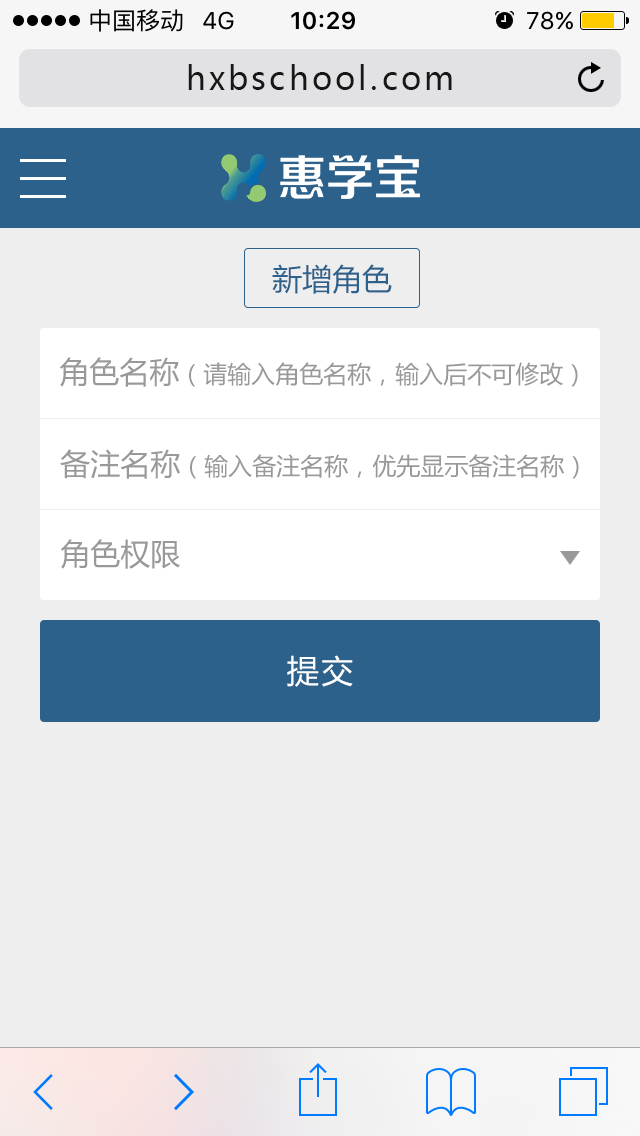
<style>
.page{position:relative;width:640px;height:1136px;background:#eeeeee}
.page>*{position:absolute;margin:0}
.t1{font:32px "MicrosoftYaHei";letter-spacing:0.1em;color:#171717}
.t2{font:30px "MicrosoftYaHei";color:#2c618b}
.t3{font:24px "MicrosoftYaHei";color:#999999}
.t4{font:30px "MicrosoftYaHei";color:#999999}
.t5{font:32px "MicrosoftYaHei";letter-spacing:0.075em;color:#ffffff}
</style>
<div class="page">
<p class="t1" style="left:188px;top:64px;width:264px;height:26px">hxbschool.com</p>
<p class="t2" style="left:272px;top:264px;width:120px;height:30px">新增角色</p>
<p class="t3" style="left:59px;top:357px;width:519px;height:30px"><span class="t4">角色名称</span>（请输入角色名称，输入后不可修改）</p>
<p class="t3" style="left:60px;top:449px;width:519px;height:30px"><span class="t4">备注名称</span>（输入备注名称，优先显示备注名称）</p>
<p class="t4" style="left:60px;top:539px;width:120px;height:30px">角色权限</p>
<p class="t5" style="left:287px;top:655px;width:66px;height:32px">提交</p>
</div>
